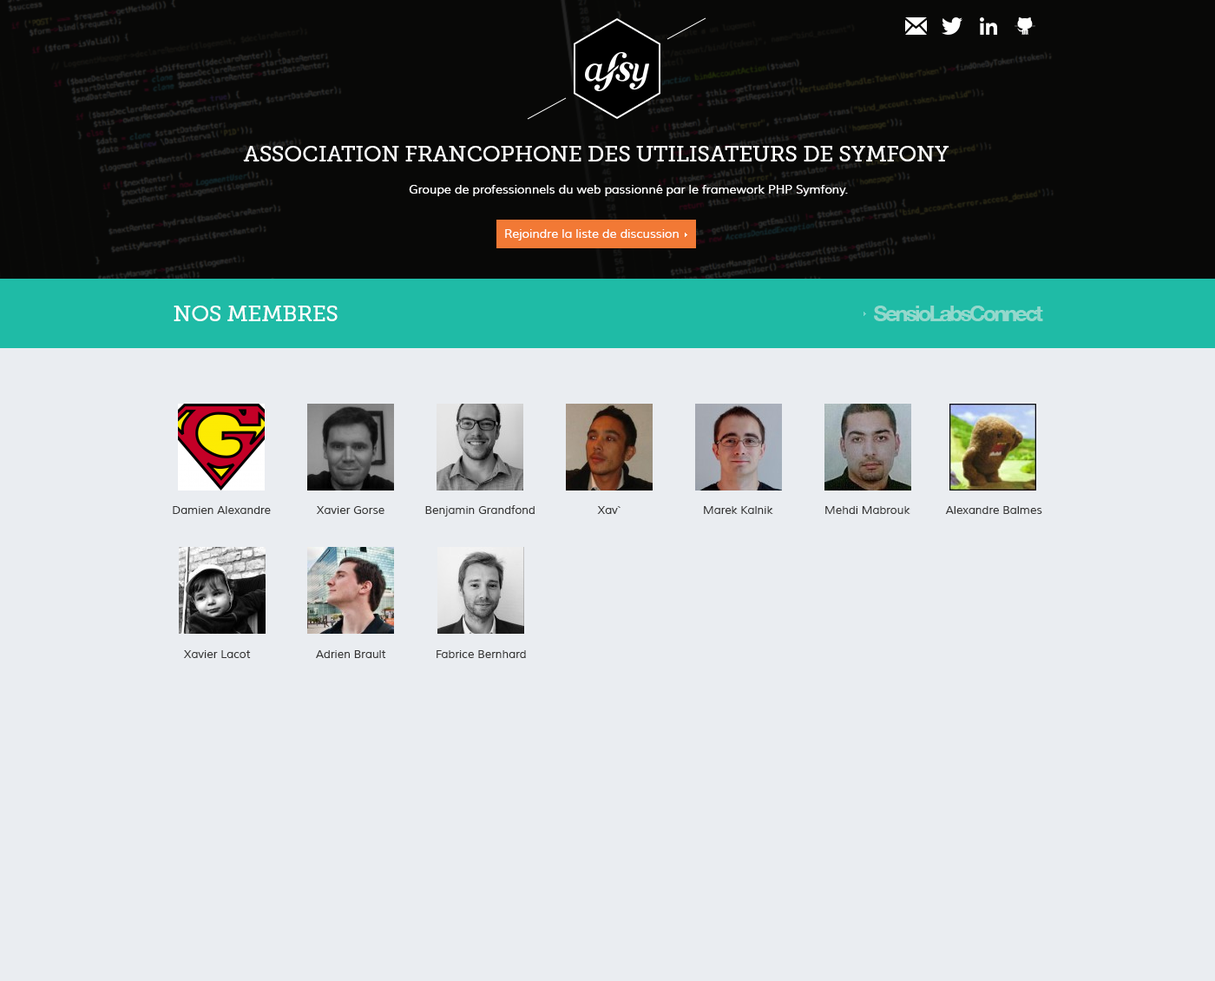
<style>
.page{position:relative;width:1215px;height:981px;background:#eaedf1}
.page>*{position:absolute;margin:0}
.t1{font:21.7px "MuseoSlab-500";color:#ffffff;text-transform:uppercase}
.t2{font:12.2px "Muli";color:#ffffff}
.t3{font:21.7px "HelveticaNeue-Bold";letter-spacing:-0.11em;color:#94d8cc}
.t4{font:11.3px "Muli";color:#353535}
</style>
<div class="page">
<p class="t1" style="left:243px;top:146px;width:706px;height:15px">Association Francophone des Utilisateurs de Symfony</p>
<p class="t2" style="left:409px;top:185px;width:439px;height:11px">Groupe de professionnels du web passionné par le framework PHP Symfony.</p>
<p class="t2" style="left:505px;top:229px;width:174px;height:11px">Rejoindre la liste de discussion</p>
<p class="t1" style="left:174px;top:306px;width:164px;height:15px">Nos membres</p>
<p class="t3" style="left:874px;top:306px;width:170px;height:15px">SensioLabsConnect</p>
<p class="t4" style="left:173px;top:506px;width:98px;height:8px">Damien Alexandre</p>
<p class="t4" style="left:316px;top:506px;width:69px;height:8px">Xavier Gorse</p>
<p class="t4" style="left:425px;top:505px;width:110px;height:12px">Benjamin Grandfond</p>
<p class="t4" style="left:597px;top:506px;width:24px;height:8px">Xav`</p>
<p class="t4" style="left:704px;top:506px;width:70px;height:8px">Marek Kalnik</p>
<p class="t4" style="left:826px;top:506px;width:85px;height:8px">Mehdi Mabrouk</p>
<p class="t4" style="left:945px;top:506px;width:98px;height:8px">Alexandre Balmes</p>
<p class="t4" style="left:183px;top:650px;width:68px;height:8px">Xavier Lacot</p>
<p class="t4" style="left:316px;top:650px;width:70px;height:8px">Adrien Brault</p>
<p class="t4" style="left:437px;top:650px;width:89px;height:8px">Fabrice Bernhard</p>
</div>
